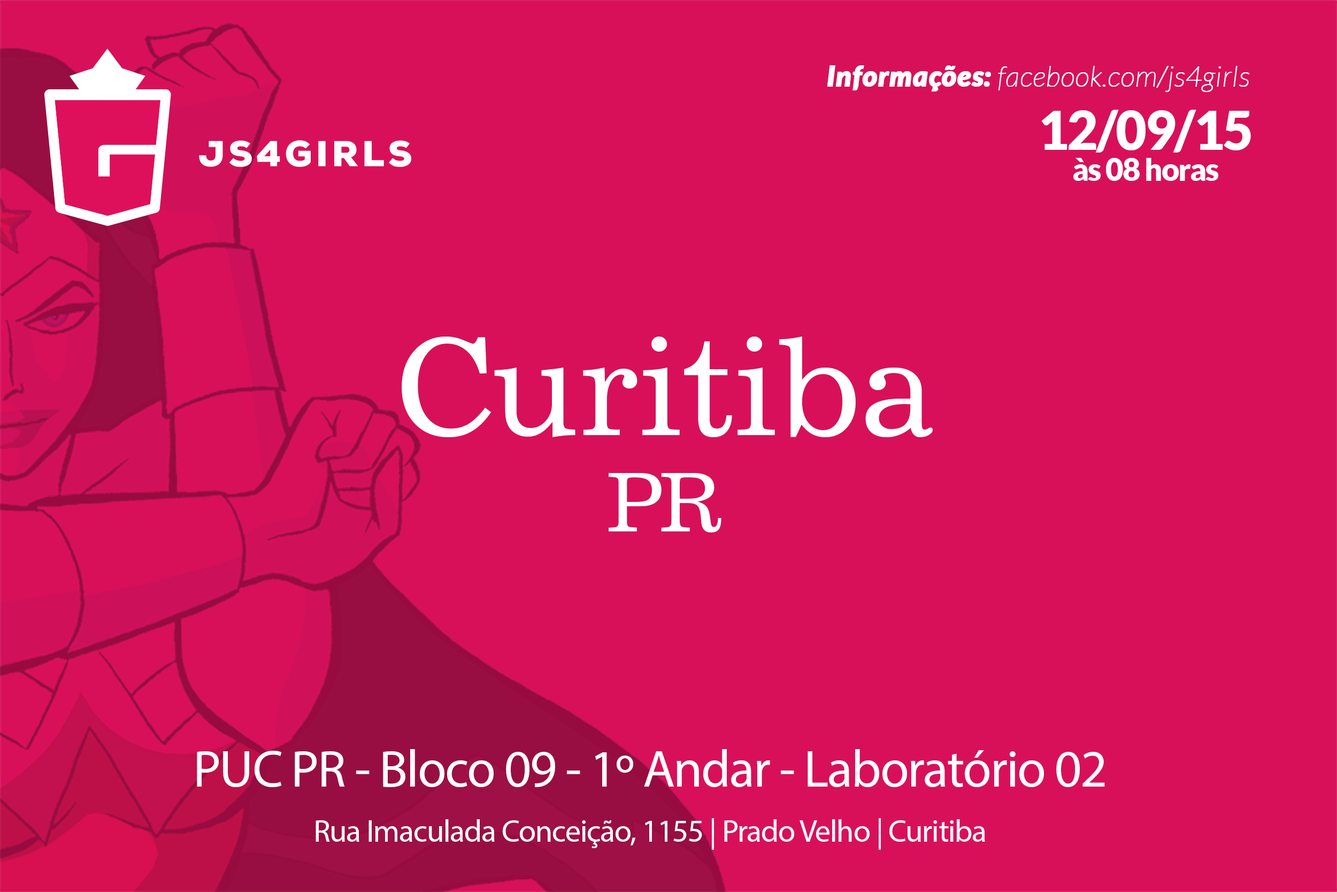
<style>
.page{position:relative;width:1337px;height:892px;background:#d8105a}
.page>*{position:absolute;margin:0}
.t1{font:28.2px "Lato-HairlineItalic";color:#ffffff;font-weight:bold}
.t2{font:28.2px "Lato-BlackItalic";color:#ffffff;font-weight:bold}
.t3{font:31.2px/31.2px "Lato-Black";letter-spacing:-0.035em;color:#ffffff}
.t4{font:53.5px/31.2px "Lato-Black";letter-spacing:-0.035em;color:#ffffff}
.t5{font:133.8px "News702BT-Roman";color:#ffffff}
.t6{font:80.2px "News702BT-Roman";letter-spacing:-0.05em;color:#ffffff}
.t7{font:31.5px/12.8px "MyriadPro-Regular";letter-spacing:-0.025em;color:#ffffff}
.t8{font:52.5px/42px "MyriadPro-Regular";letter-spacing:-0.025em;color:#ffffff}
</style>
<div class="page">
<p class="t1" style="left:827px;top:65px;width:423px;height:27px"><span class="t2">Informações: </span>facebook.com/js4girls</p>
<p class="t3" style="left:1041px;top:110px;width:210px;height:71px;text-align:center"><span class="t4">12/09/15<br></span>às 08 horas</p>
<p class="t5" style="left:402px;top:336px;width:531px;height:196px;text-align:center">Curitiba<br><span class="t6">PR</span></p>
<p class="t7" style="left:197px;top:749px;width:908px;height:100px;text-align:center"><span class="t8">PUC PR - Bloco 09 - 1º Andar - Laboratório 02<br><br></span>Rua Imaculada Conceição, 1155 | Prado Velho | Curitiba</p>
</div>
